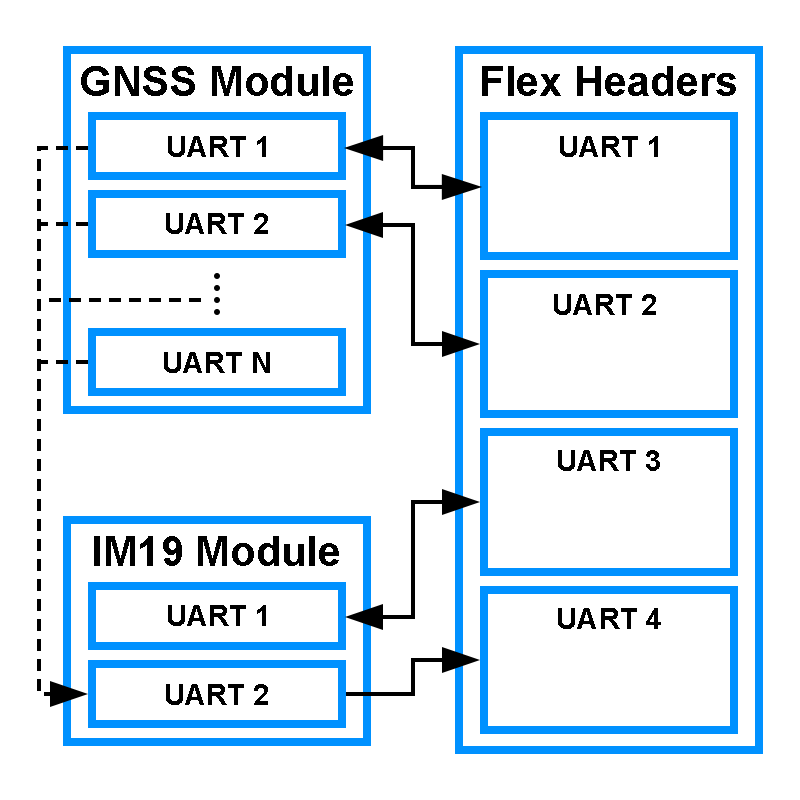
<style>
.page{position:relative;width:800px;height:800px;background:#ffffff}
.page>*{position:absolute;margin:0}
.t1{font:41.7px "Arial-BoldMT";color:#000000}
.t2{font:29.2px "Arial-BoldMT";color:#000000}
</style>
<div class="page">
<p class="t1" style="left:81px;top:66px;width:272px;height:30px">GNSS Module</p>
<p class="t1" style="left:482px;top:66px;width:254px;height:30px">Flex Headers</p>
<p class="t2" style="left:168px;top:136px;width:98px;height:21px">UART 1</p>
<p class="t2" style="left:560px;top:136px;width:98px;height:21px">UART 1</p>
<p class="t2" style="left:166px;top:213px;width:102px;height:21px">UART 2</p>
<p class="t2" style="left:554px;top:294px;width:102px;height:21px">UART 2</p>
<p class="t2" style="left:164px;top:352px;width:106px;height:21px">UART N</p>
<p class="t2" style="left:558px;top:450px;width:102px;height:21px">UART 3</p>
<p class="t1" style="left:94px;top:536px;width:245px;height:30px">IM19 Module</p>
<p class="t2" style="left:168px;top:605px;width:98px;height:21px">UART 1</p>
<p class="t2" style="left:558px;top:608px;width:103px;height:21px">UART 4</p>
<p class="t2" style="left:166px;top:684px;width:102px;height:21px">UART 2</p>
</div>
